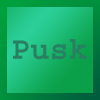
<style>
.page{position:relative;width:100px;height:100px}
.page>*{position:absolute;margin:0}
.t1{font:32px "Courier-Bold";color:#287f62}
</style>
<div class="page">
<p class="t1" style="left:13px;top:39px;width:74px;height:21px">Pusk</p>
</div>
